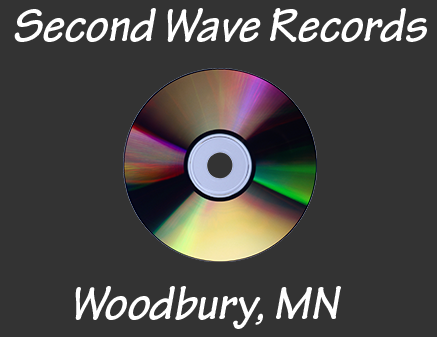
<style>
.page{position:relative;width:437px;height:337px;background:#333333}
.page>*{position:absolute;margin:0}
.t1{font:50.3px "TektonPro-BoldObl";color:#ffffff}
</style>
<div class="page">
<p class="t1" style="left:14px;top:8px;width:413px;height:34px">Second Wave Records</p>
<p class="t1" style="left:75px;top:286px;width:266px;height:43px">Woodbury, MN</p>
</div>
